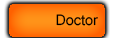
<style>
.page{position:relative;width:114px;height:38px}
.page>*{position:absolute;margin:0}
.t1{font:15.6px "Gautami";color:#000000}
</style>
<div class="page">
<p class="t1" style="left:56px;top:14px;width:42px;height:12px">Doctor</p>
</div>
